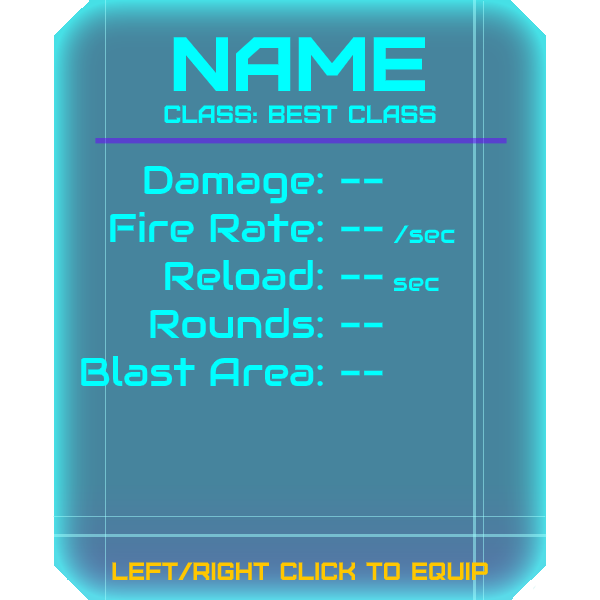
<style>
.page{position:relative;width:600px;height:600px;background:#46849d}
.page>*{position:absolute;margin:0}
.t1{font:76.8px "Furore";color:#00ffff;scale:1.13 1}
.t2{font:25px "Furore";color:#00ffff}
.t3{font:40px "Audiowide-Regular";color:#00ffff}
.t4{font:25px "Audiowide-Regular";color:#00ffff}
.t5{font:25px "Furore";color:#ffc700}
</style>
<div class="page">
<p class="t1" style="left:173px;top:37px;width:253px;height:54px">name</p>
<p class="t2" style="left:164px;top:105px;width:272px;height:18px">Class: best class</p>
<p class="t3" style="left:81px;top:165px;width:242px;height:221px;text-align:right">Damage:<br>Fire Rate:<br>Reload:<br>Rounds:<br>Blast Area:</p>
<p class="t3" style="left:341px;top:178px;width:114px;height:198px">--<br>-- <span class="t4">/sec<br></span>-- <span class="t4">sec<br></span>--<br>--</p>
<p class="t5" style="left:112px;top:562px;width:376px;height:18px">left/right click to equip</p>
</div>
